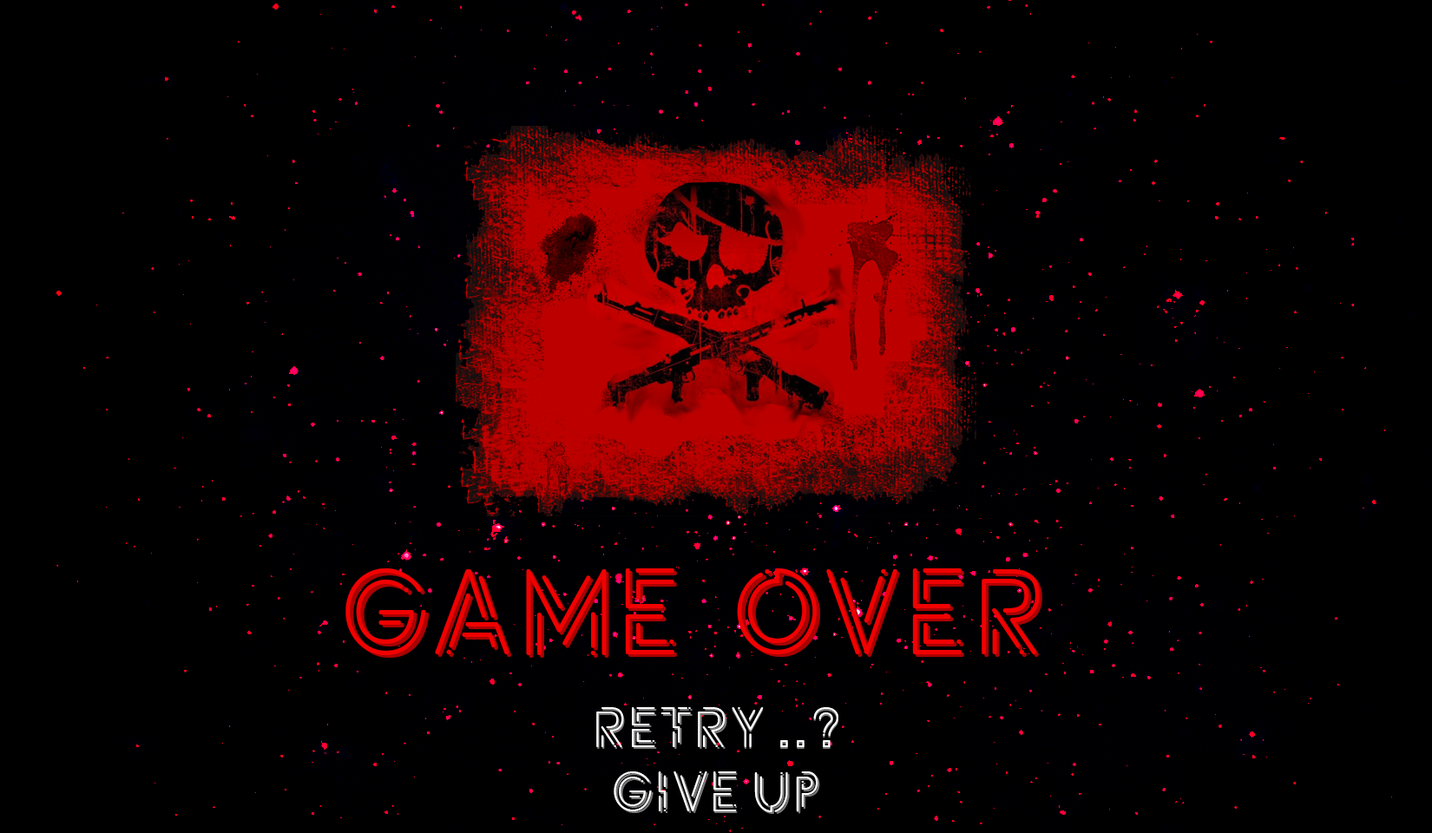
<style>
.page{position:relative;width:1432px;height:833px;background:#000000}
.page>*{position:absolute;margin:0}
.t1{font:122px "Potra";color:#f20000}
.t2{font:122px "Potra"}
.t3{font:57.2px "Potra";color:#ffffff}
.t4{font:57.2px "Potra";color:#7a7a7a}
</style>
<div class="page">
<p class="t1" style="left:345px;top:568px;width:694px;height:87px">GAME  OVER</p>
<p class="t2" style="left:349px;top:571px;width:693px;height:87px">GAME  OVER</p>
<p class="t3" style="left:596px;top:707px;width:242px;height:40px">Retry ..?</p>
<p class="t4" style="left:597px;top:709px;width:241px;height:40px">RETRY ..?</p>
<p class="t3" style="left:613px;top:771px;width:205px;height:41px">Give up</p>
<p class="t4" style="left:615px;top:773px;width:205px;height:41px">give up</p>
</div>
